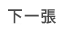
<style>
.page{position:relative;width:63px;height:32px;background:#ffffff}
.page>*{position:absolute;margin:0}
.t1{font:16px "LinGothic-Extra";letter-spacing:0.05em;color:#494949}
</style>
<div class="page">
<p class="t1" style="left:8px;top:9px;width:48px;height:15px">下一張</p>
</div>
